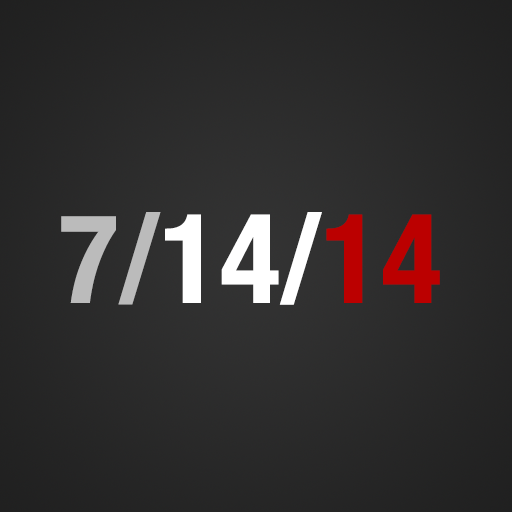
<style>
.page{position:relative;width:512px;height:512px}
.page>*{position:absolute;margin:0}
.t1{font:125px "HelveticaNeue-CondensedBold";color:#ffffff}
.t2{font:125px "HelveticaNeue-CondensedBold";color:#bbbbbb}
.t3{font:125px "HelveticaNeue-CondensedBold";color:#bb0000}
</style>
<div class="page">
<p class="t1" style="left:61px;top:212px;width:379px;height:93px"><span class="t2">7/</span>14/<span class="t3">14</span></p>
</div>
